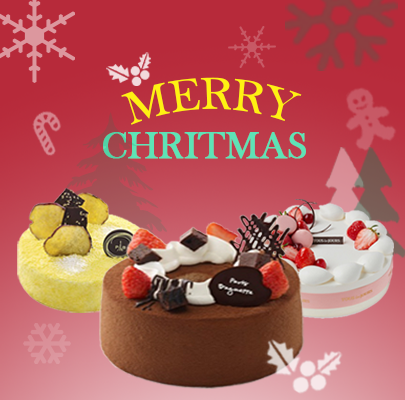
<style>
.page{position:relative;width:405px;height:400px}
.page>*{position:absolute;margin:0}
.t1{font:46.6px "BaskOldFace";color:#fff112;scale:0.9 1}
.t2{font:39.3px "BaskOldFace";color:#5ee3b6;font-weight:bold;scale:0.96 1}
</style>
<div class="page">
<p class="t1" style="left:121px;top:77px;width:181px;height:48px">MERRY</p>
<p class="t2" style="left:103px;top:132px;width:203px;height:27px">CHRITMAS</p>
</div>
